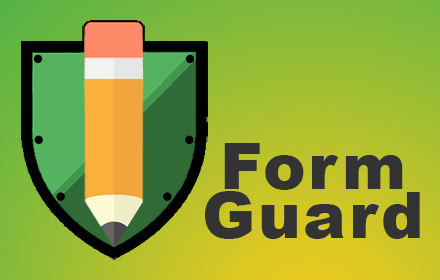
<style>
.page{position:relative;width:440px;height:280px}
.page>*{position:absolute;margin:0}
.t1{font:64px/49.3px "Arial-Black";letter-spacing:0.04em;color:#333333}
</style>
<div class="page">
<p class="t1" style="left:205px;top:143px;width:215px;height:96px;text-align:center">Form<br>Guard</p>
</div>
